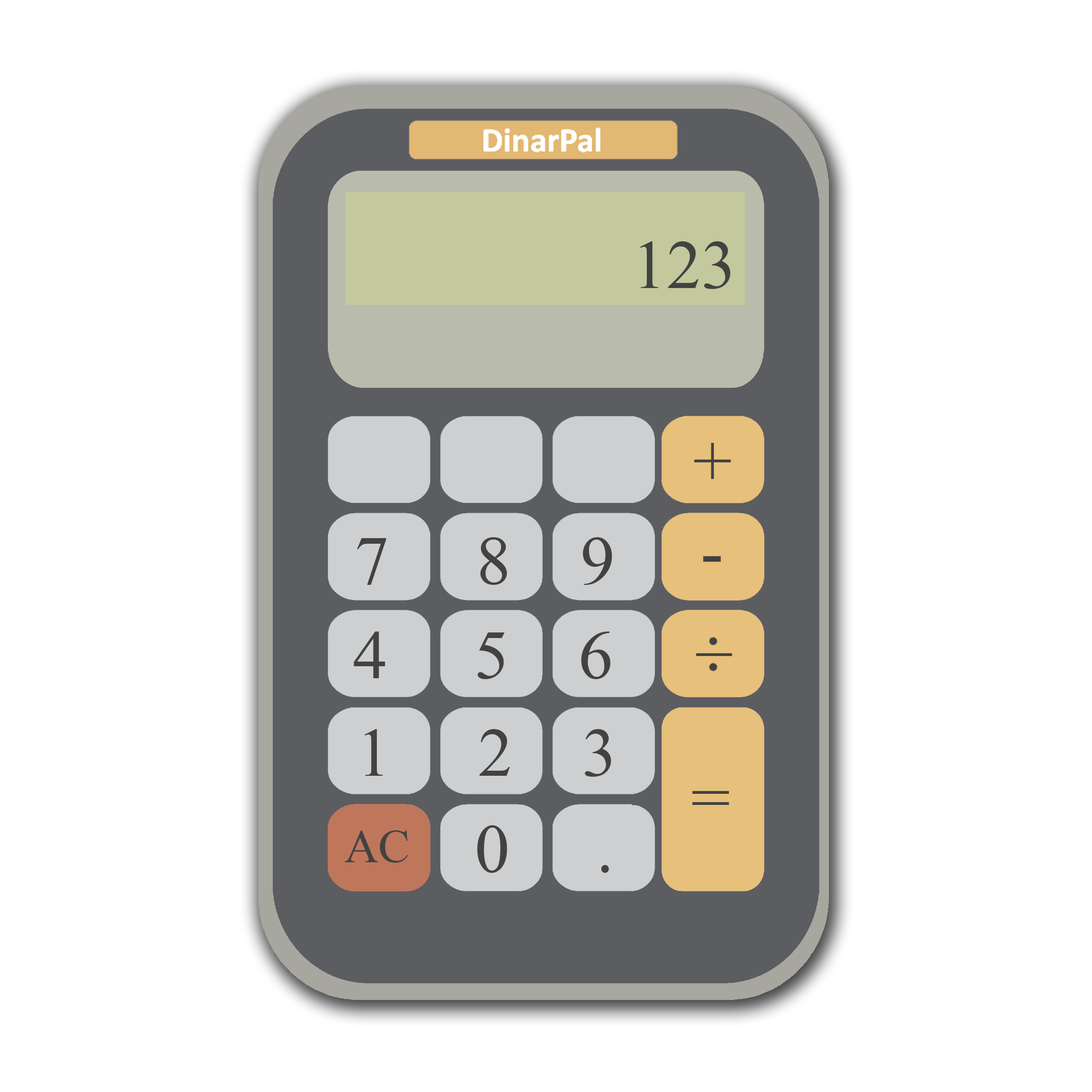
<style>
.page{position:relative;width:1092px;height:1092px;background:#ffffff}
.page>*{position:absolute;margin:0}
.t1{font:69.3px "TimesNewRomanPSMT";color:#424241}
.t2{font:47.1px "TimesNewRomanPSMT";color:#424241}
</style>
<div class="page">
<p class="t1" style="left:640px;top:241px;width:90px;height:48px">123</p>
<p class="t1" style="left:694px;top:443px;width:37px;height:36px">+</p>
<p class="t1" style="left:357px;top:537px;width:255px;height:48px">7     8    9</p>
<p class="t1" style="left:703px;top:556px;width:18px;height:6px">-</p>
<p class="t1" style="left:354px;top:632px;width:257px;height:47px">4     5    6</p>
<p class="t1" style="left:364px;top:729px;width:247px;height:48px">1     2    3</p>
<p class="t1" style="left:692px;top:791px;width:37px;height:14px">=</p>
<p class="t2" style="left:344px;top:830px;width:64px;height:33px">AC</p>
<p class="t1" style="left:477px;top:825px;width:132px;height:48px">0     .</p>
</div>
